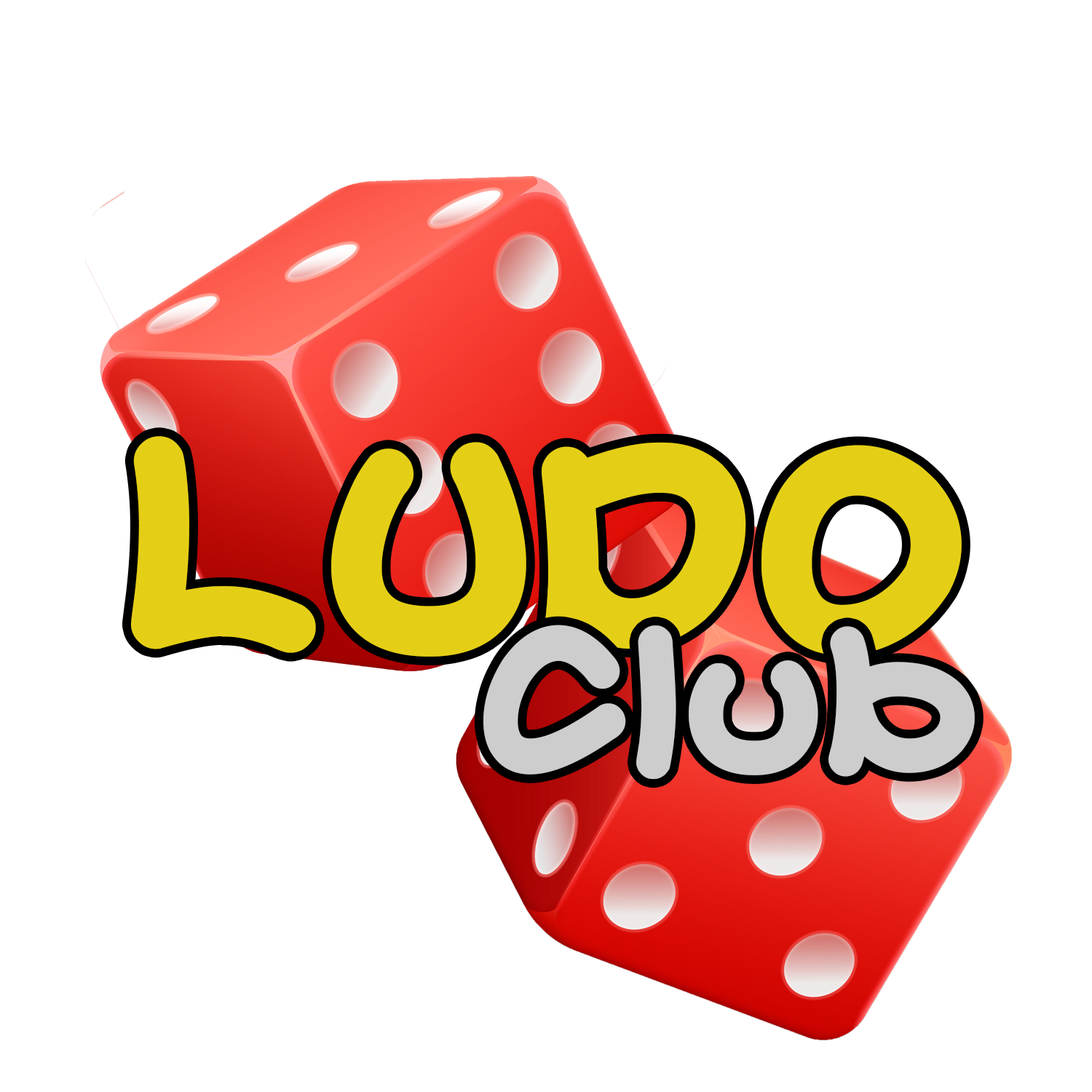
<style>
.page{position:relative;width:1092px;height:1092px;background:#ffffff}
.page>*{position:absolute;margin:0}
.t1{font:320.3px "CARTOONIC";color:#e5cf16}
.t2{font:218.4px "CARTOONIC";color:#cdcdcd}
</style>
<div class="page">
<p class="t1" style="left:131px;top:436px;width:831px;height:221px">LUDO</p>
<p class="t2" style="left:483px;top:625px;width:492px;height:155px">Club</p>
</div>
